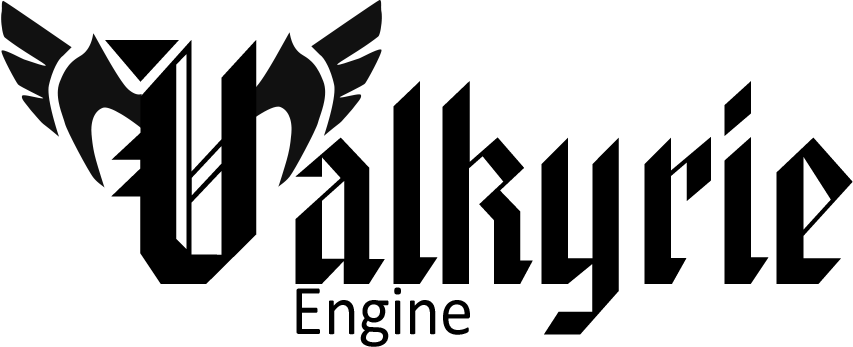
<style>
.page{position:relative;width:853px;height:347px;background:#ffffff}
.page>*{position:absolute;margin:0}
.t1{font:295.9px "AmericanText";color:#000000}
.t2{font:246px "AmericanText";color:#000000}
.t3{font:72px "Calibri";color:#000000;scale:0.92 1}
</style>
<div class="page">
<p class="t1" style="left:105px;top:40px;width:152px;height:244px">V</p>
<p class="t2" style="left:295px;top:81px;width:558px;height:254px">alkyrie</p>
<p class="t3" style="left:296px;top:287px;width:174px;height:60px">Engine</p>
</div>
